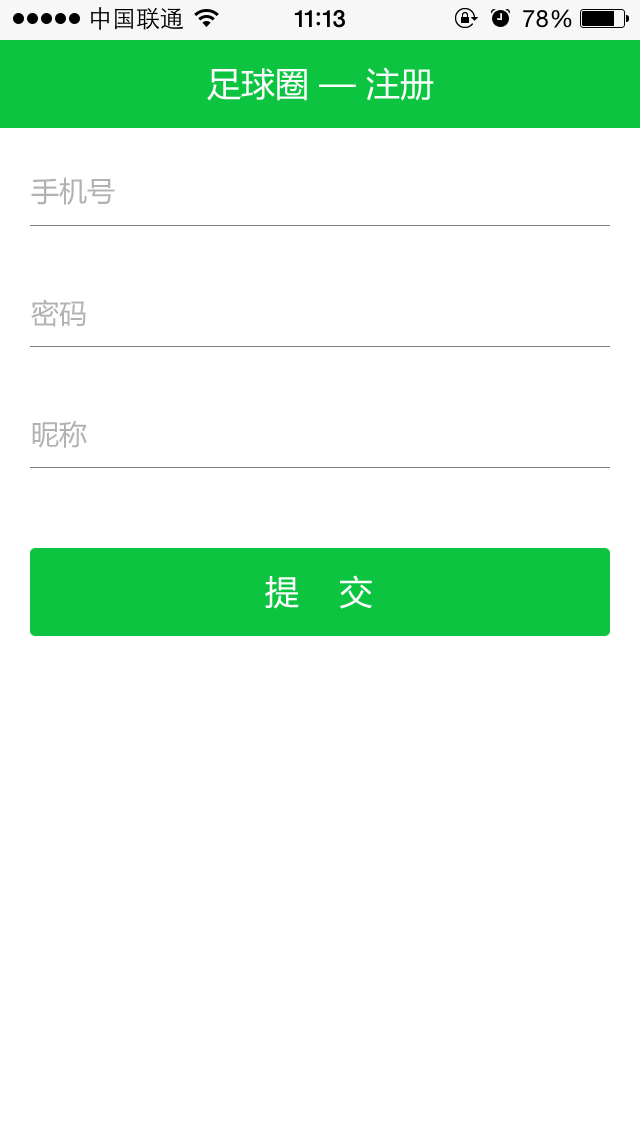
<style>
.page{position:relative;width:640px;height:1136px;background:#ffffff}
.page>*{position:absolute;margin:0}
.t1{font:34px "MicrosoftYaHei";color:#ffffff}
.t2{font:28px "MicrosoftYaHei";color:#b2b2b2}
</style>
<div class="page">
<p class="t1" style="left:207px;top:67px;width:227px;height:34px">足球圈 — 注册</p>
<p class="t2" style="left:31px;top:177px;width:84px;height:28px">手机号</p>
<p class="t2" style="left:31px;top:299px;width:55px;height:28px">密码</p>
<p class="t2" style="left:32px;top:420px;width:55px;height:28px">昵称</p>
<p class="t1" style="left:265px;top:575px;width:107px;height:34px">提    交</p>
</div>
